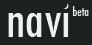
<style>
.page{position:relative;width:92px;height:45px;background:#1c2122}
.page>*{position:absolute;margin:0}
.t1{font:48px "Futura-CondensedMedium";color:#ebf1f0}
.t2{font:12px "Futura-CondensedMedium";color:#ebf1f0}
</style>
<div class="page">
<p class="t1" style="left:8px;top:3px;width:61px;height:34px">navi</p>
<p class="t2" style="left:73px;top:6px;width:16px;height:10px">beta</p>
</div>
